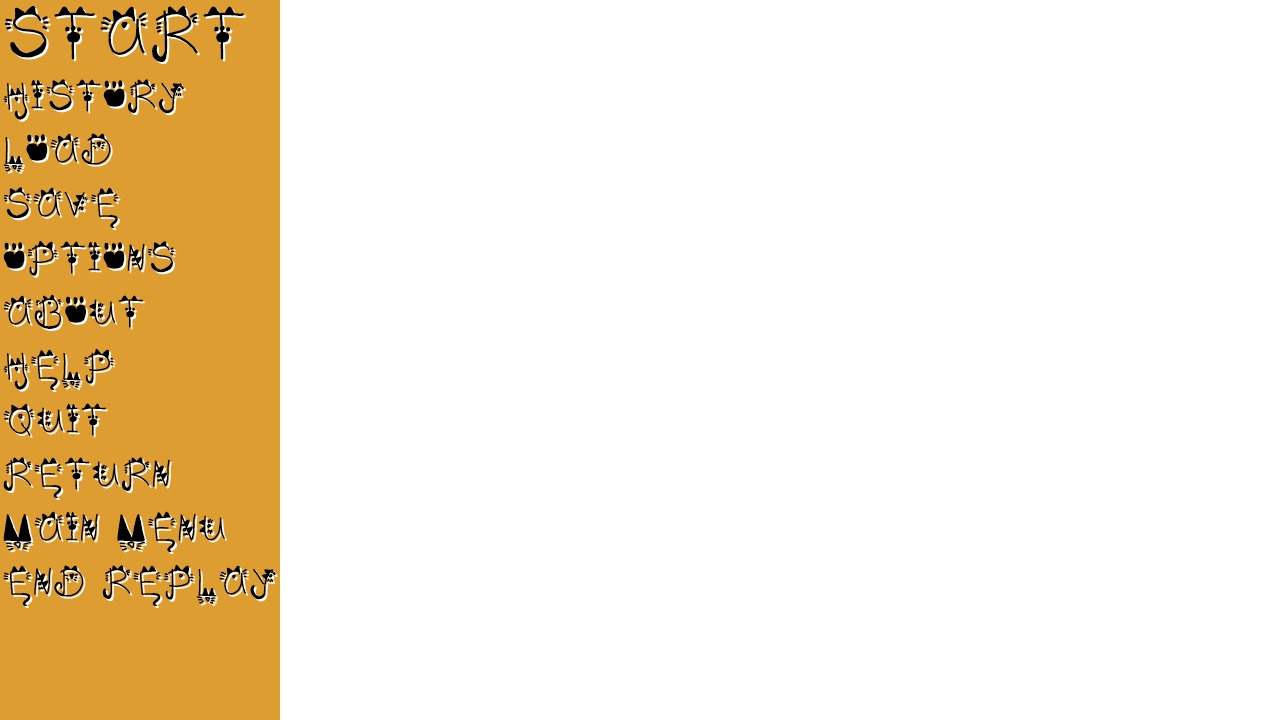
<style>
.page{position:relative;width:1280px;height:720px;background:#ffffff}
.page>*{position:absolute;margin:0}
.t1{font:36px/24px "Kitty_face";color:#000000}
.t2{font:60px/24px "Kitty_face";color:#000000}
</style>
<div class="page">
<p class="t1" style="left:3px;top:6px;width:273px;height:600px"><span class="t2">START<br></span>HISTORY<br>LOAD<br>SAVE<br>OPTIONS<br>ABOUT<br>HELP<br>QUIT<br>RETURN<br>MAIN MENU<br>END REPLAY</p>
</div>
